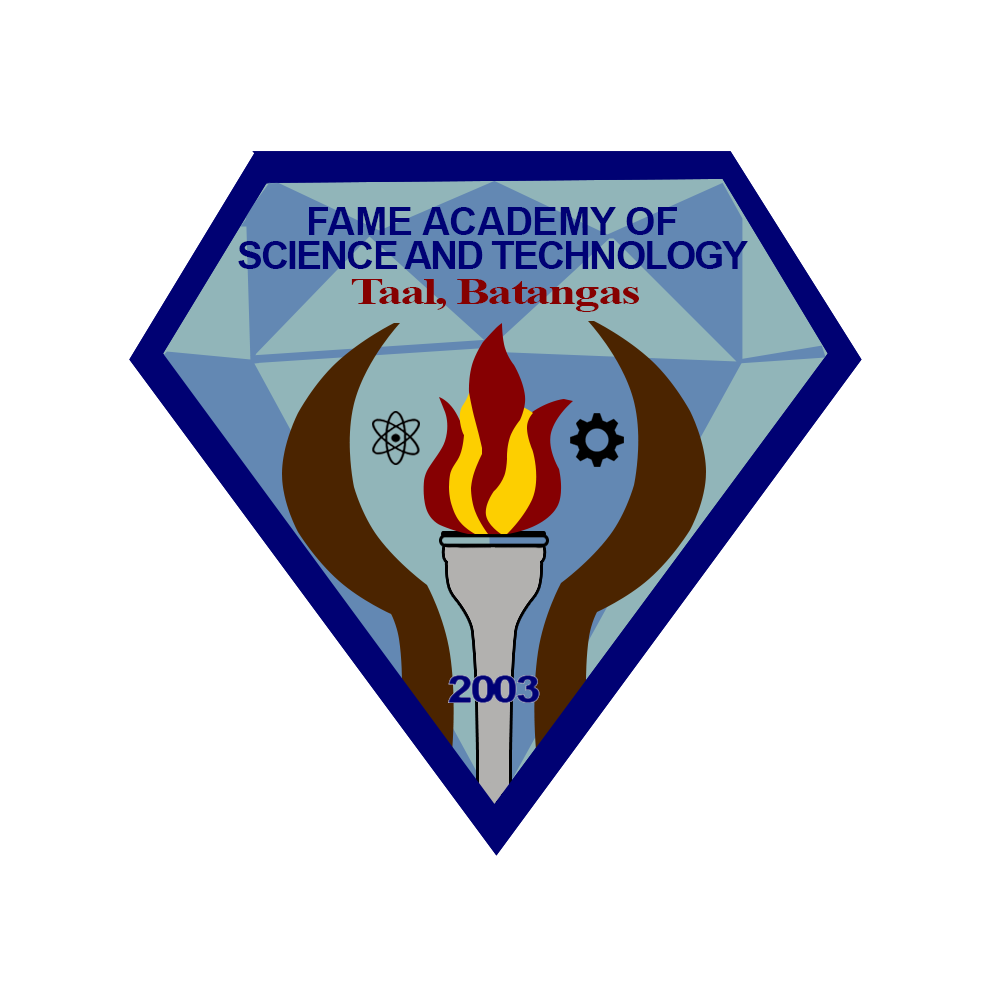
<style>
.page{position:relative;width:1000px;height:1000px;background:#ffffff}
.page>*{position:absolute;margin:0}
.t1{font:38.9px "Arial-BoldMT";letter-spacing:-0.01em;color:#000175}
.t2{font:38.9px "Arial-BoldMT";letter-spacing:-0.05em;color:#000175}
.t3{font:36.9px "TimesNewRomanPS-BoldMT";letter-spacing:-0.05em;color:#860000;scale:1.39 1}
.t4{font:38.9px "Arial-Black";letter-spacing:-0.09em;color:#000175}
</style>
<div class="page">
<p class="t1" style="left:309px;top:207px;width:368px;height:28px">FAME ACADEMY OF</p>
<p class="t2" style="left:238px;top:241px;width:510px;height:28px">SCIENCE AND TECHNOLOGY</p>
<p class="t3" style="left:351px;top:279px;width:288px;height:33px">Taal, Batangas</p>
<p class="t4" style="left:448px;top:675px;width:92px;height:28px">2003</p>
</div>
